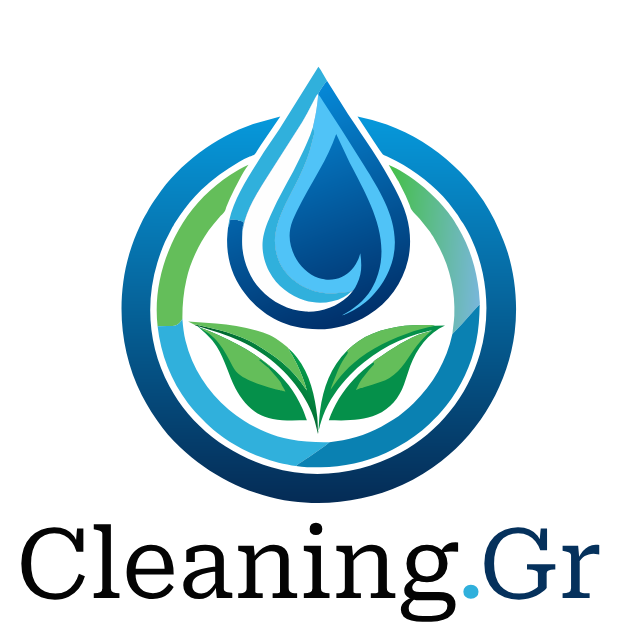
<style>
.page{position:relative;width:637px;height:637px;background:#ffffff}
.page>*{position:absolute;margin:0}
.t1{font:97.2px "RobotoSerif-Regular";color:#040404}
.t2{font:97.2px "RobotoSerif-Regular";color:#30b0dc}
.t3{font:97.2px "RobotoSerif-Regular";color:#05315c}
</style>
<div class="page">
<p class="t1" style="left:21px;top:522px;width:579px;height:100px">Cleaning<span class="t2">.</span><span class="t3">Gr</span></p>
</div>
